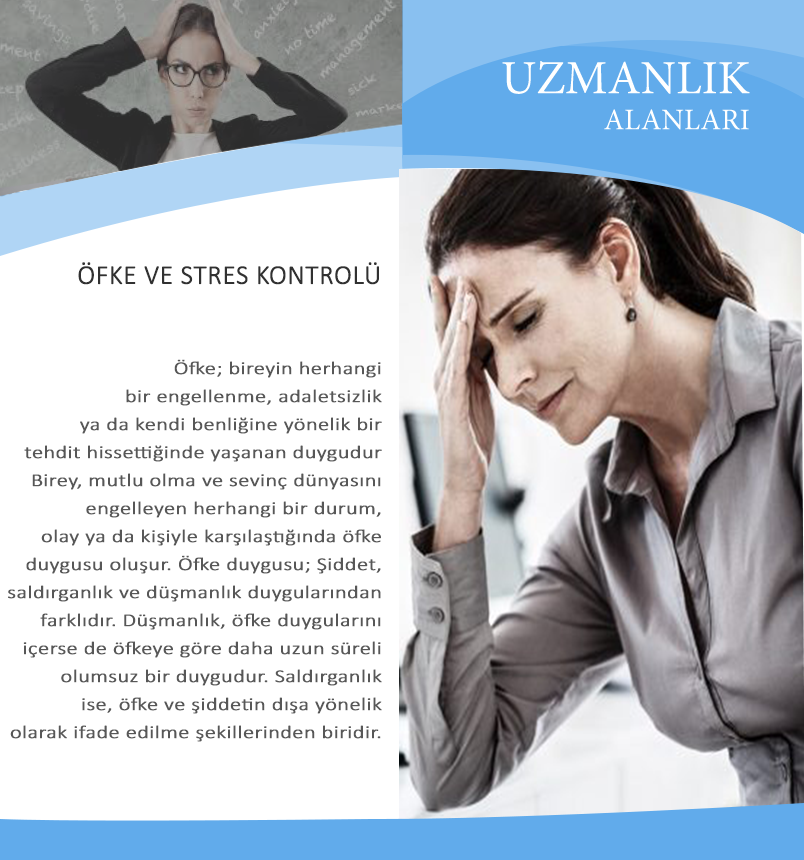
<style>
.page{position:relative;width:804px;height:860px;background:#ffffff}
.page>*{position:absolute;margin:0}
.t1{font:47.6px "MinionPro-Regular";color:#ffffff}
.t2{font:30px "MinionPro-Regular";color:#ffffff}
.t3{font:27px "Calibri-Light";color:#313131;font-weight:bold}
.t4{font:18.1px/28px "Calibri-Light";color:#575757;font-weight:bold;scale:1.22 1}
</style>
<div class="page">
<p class="t1" style="left:502px;top:61px;width:248px;height:69px;text-align:right">UZMANLIK<br><span class="t2"> ALANLARI</span></p>
<p class="t3" style="left:78px;top:262px;width:301px;height:23px">ÖFKE VE STRES KONTROLÜ</p>
<p class="t4" style="left:8px;top:359px;width:374px;height:383px;text-align:right">Öfke; bireyin herhangi<br> bir engellenme, adaletsizlik<br>ya da kendi benliğine yönelik bir<br>tehdit hissettiğinde yaşanan duygudur<br>Birey, mutlu olma ve sevinç dünyasını<br>engelleyen herhangi bir durum,<br>olay ya da kişiyle karşılaştığında öfke<br>duygusu oluşur. Öfke duygusu; Şiddet,<br>saldırganlık ve düşmanlık duygularından<br>farklıdır. Düşmanlık, öfke duygularını<br>içerse de öfkeye göre daha uzun süreli<br>olumsuz bir duygudur. Saldırganlık<br>ise, öfke ve şiddetin dışa yönelik<br>olarak ifade edilme şekillerinden biridir.</p>
</div>
